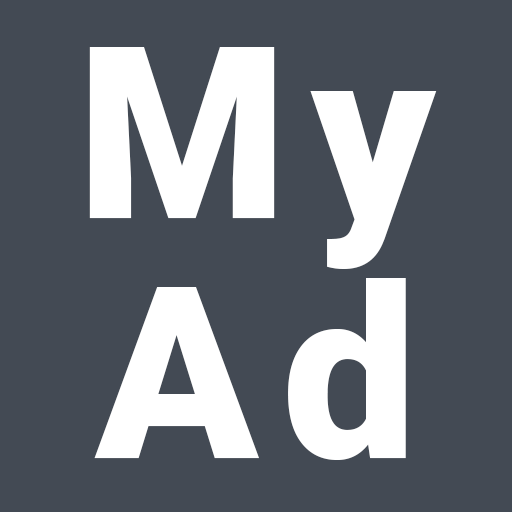
<style>
.page{position:relative;width:512px;height:512px;background:#434a54}
.page>*{position:absolute;margin:0}
.t1{font:240px/240px "Roboto-Black";letter-spacing:0.1em;color:#ffffff}
</style>
<div class="page">
<p class="t1" style="left:89px;top:47px;width:348px;height:413px;text-align:center">My<br>Ad</p>
</div>
